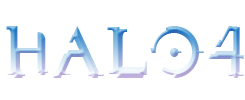
<style>
.page{position:relative;width:245px;height:100px;background:#ffffff}
.page>*{position:absolute;margin:0}
.t1{font:98.3px "Halo";scale:0.5 1}
</style>
<div class="page">
<p class="t1" style="left:6px;top:26px;width:238px;height:52px">HALO4</p>
</div>
